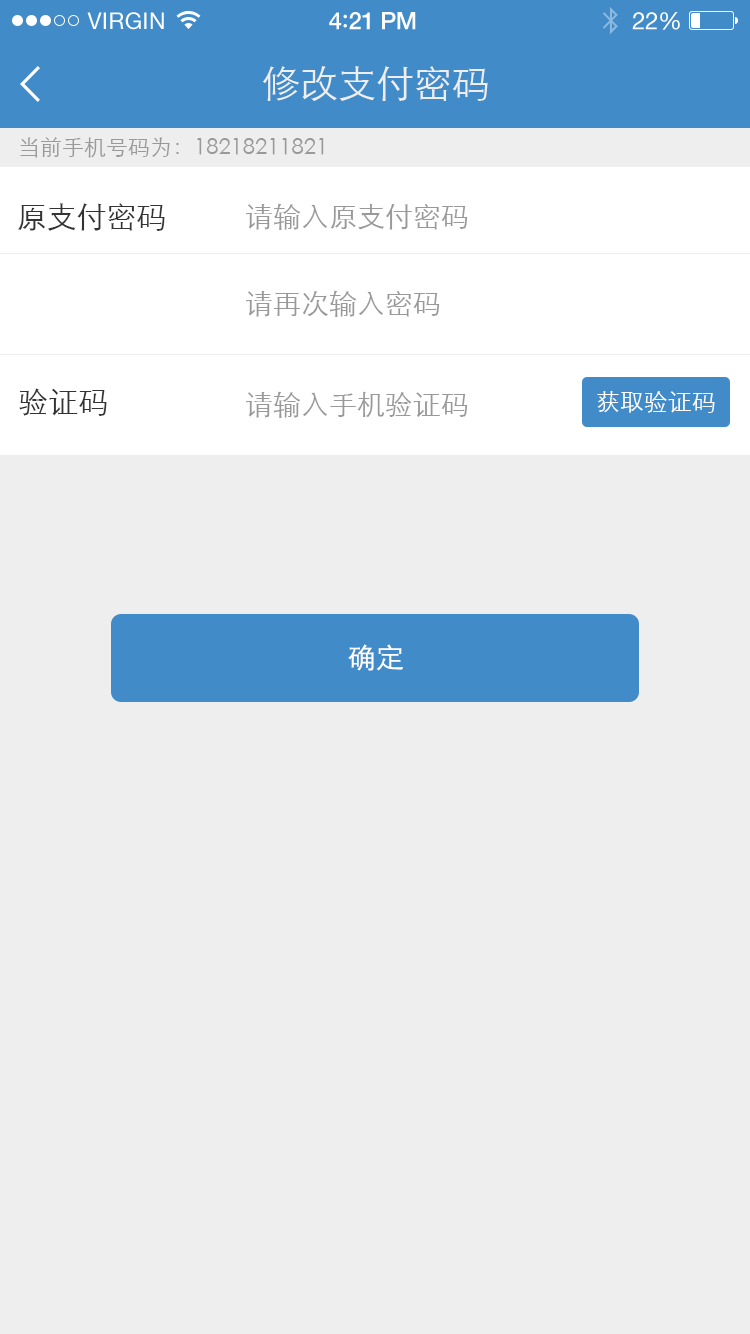
<style>
.page{position:relative;width:750px;height:1334px;background:#eeeeee}
.page>*{position:absolute;margin:0}
.t1{font:23px "HelveticaNeue";letter-spacing:0.02em;color:#ffffff}
.t2{font:24px "HelveticaNeue-Medium";letter-spacing:-0.02em;color:#ffffff}
.t3{font:26px "Avenir-Medium";letter-spacing:-0.02em;color:#ffffff}
.t4{font:24px "HelveticaNeue";letter-spacing:-0.02em;color:#ffffff}
.t5{font:38px "STXihei";color:#eeeeee}
.t6{font:22px "STXihei";color:#999999}
.t7{font:30px "STXihei";color:#333333}
.t8{font:28px "STXihei";color:#999999}
.t9{font:24px "STXihei";color:#ffffff}
.t10{font:28px "STXihei";color:#ffffff}
</style>
<div class="page">
<p class="t1" style="left:87px;top:12px;width:77px;height:18px">VIRGIN</p>
<p class="t2" style="left:329px;top:12px;width:87px;height:18px">4<span class="t3">:</span>21 PM</p>
<p class="t4" style="left:632px;top:12px;width:48px;height:18px">22%</p>
<p class="t5" style="left:262px;top:66px;width:226px;height:35px">修改支付密码</p>
<p class="t6" style="left:20px;top:137px;width:304px;height:21px">当前手机号码为：18218211821</p>
<p class="t7" style="left:18px;top:203px;width:147px;height:28px">原支付密码</p>
<p class="t8" style="left:246px;top:203px;width:222px;height:27px">请输入原支付密码</p>
<p class="t8" style="left:246px;top:290px;width:194px;height:27px">请再次输入密码</p>
<p class="t7" style="left:19px;top:388px;width:88px;height:28px">验证码</p>
<p class="t8" style="left:246px;top:391px;width:222px;height:27px">请输入手机验证码</p>
<p class="t9" style="left:597px;top:391px;width:118px;height:22px">获取验证码</p>
<p class="t10" style="left:348px;top:644px;width:55px;height:27px">确定</p>
</div>
